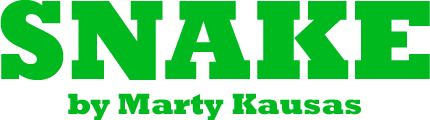
<style>
.page{position:relative;width:430px;height:120px;background:#00b91e}
.page>*{position:absolute;margin:0}
.t1{font:115px "Rockwell-ExtraBold";color:#00b91e}
.t2{font:30px "Rockwell-ExtraBold";color:#00b91e}
</style>
<div class="page">
<p class="t1" style="left:0px;top:0px;width:430px;height:80px">SNAKE</p>
<p class="t2" style="left:68px;top:93px;width:293px;height:28px">by Marty Kausas</p>
</div>
